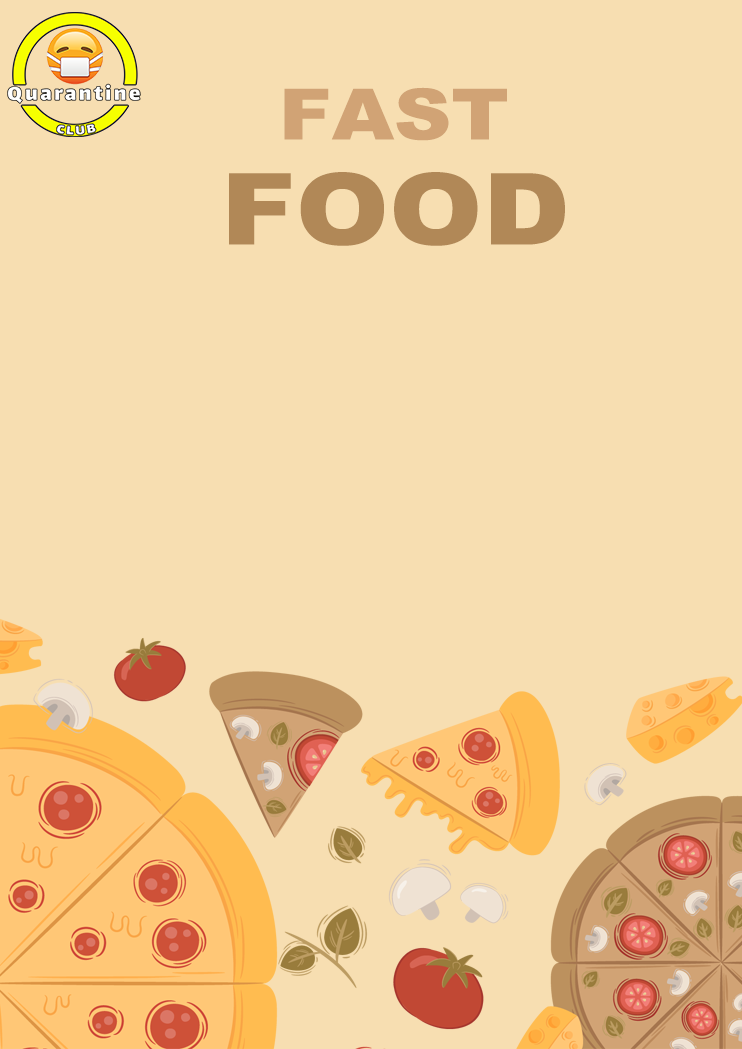
<style>
.page{position:relative;width:742px;height:1049px;background:#f7deb1}
.page>*{position:absolute;margin:0}
.t1{font:70.6px "Arial-Black";color:#d1a375;scale:1.13 1}
.t2{font:99.4px "Arial-Black";color:#b18857;scale:1.13 1}
</style>
<div class="page">
<p class="t1" style="left:284px;top:87px;width:223px;height:54px">FAST</p>
<p class="t2" style="left:229px;top:172px;width:336px;height:74px">FOOD</p>
</div>
